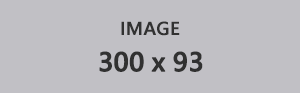
<style>
.page{position:relative;width:300px;height:93px;background:#c1c0c5}
.page>*{position:absolute;margin:0}
.t1{font:17.4px "MicrosoftJhengHeiBold";color:#313131;font-weight:bold}
.t2{font:25.1px "MicrosoftJhengHeiBold";color:#313131;font-weight:bold}
</style>
<div class="page">
<p class="t1" style="left:121px;top:21px;width:59px;height:15px">IMAGE</p>
<p class="t2" style="left:99px;top:51px;width:104px;height:21px">300 x 93</p>
</div>
